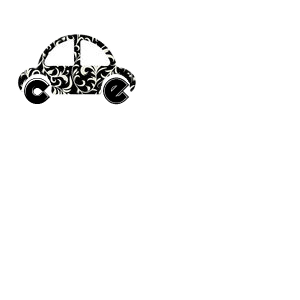
<style>
.page{position:relative;width:300px;height:300px;background:#ffffff}
.page>*{position:absolute;margin:0}
.t1{font:58.3px "Neon";color:#000000}
</style>
<div class="page">
<p class="t1" style="left:24px;top:78px;width:26px;height:26px">c</p>
<p class="t1" style="left:103px;top:77px;width:26px;height:28px">e</p>
</div>
